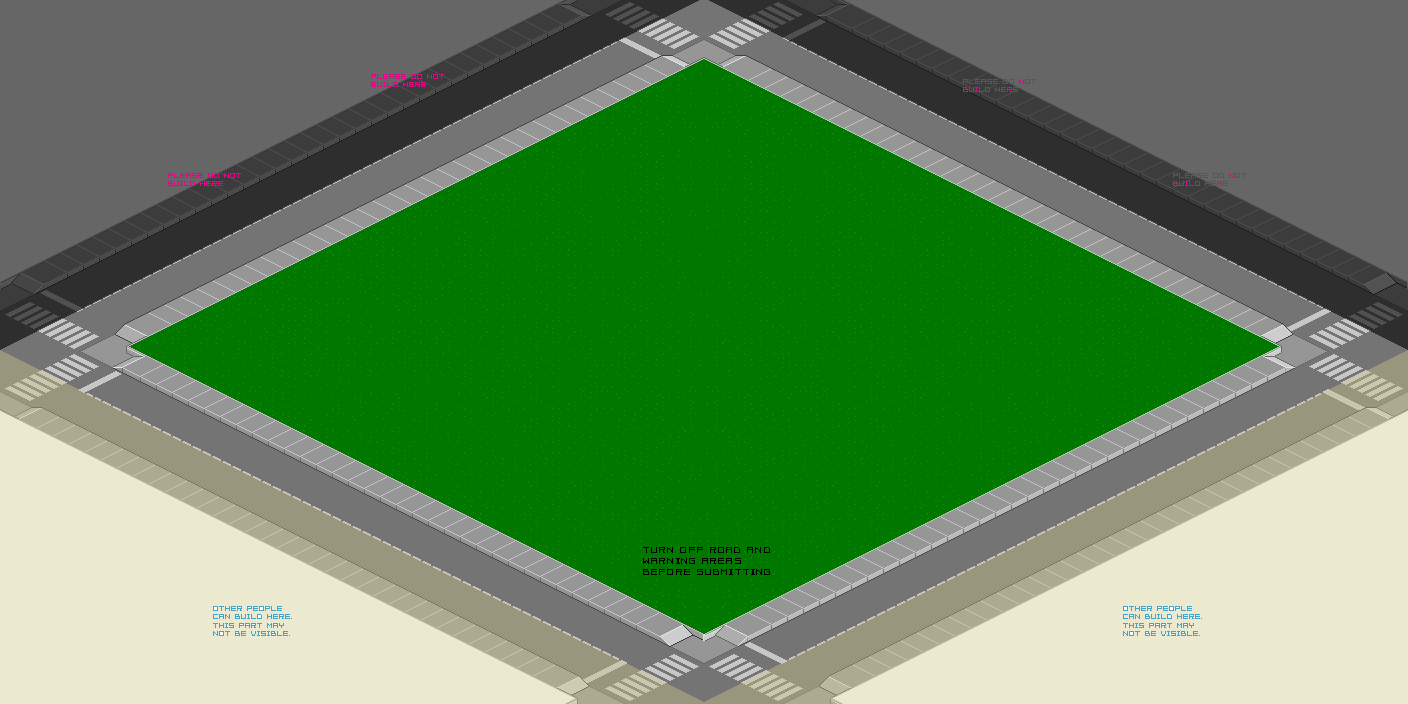
<style>
.page{position:relative;width:1408px;height:704px;background:#007800}
.page>*{position:absolute;margin:0}
.t1{font:7px "Pixelation";color:#ec008c}
.t2{font:9px "Pixelation";color:#000000}
.t3{font:7px "Pixelation";color:#3fa7ce}
</style>
<div class="page">
<p class="t1" style="left:371px;top:74px;width:73px;height:13px">PLEASE DO NOT<br>BUILD HERE</p>
<p class="t1" style="left:963px;top:79px;width:73px;height:13px">PLEASE DO NOT<br>BUILD HERE</p>
<p class="t1" style="left:168px;top:173px;width:73px;height:13px">PLEASE DO NOT<br>BUILD HERE</p>
<p class="t1" style="left:1173px;top:173px;width:73px;height:13px">PLEASE DO NOT<br>BUILD HERE</p>
<p class="t2" style="left:643px;top:547px;width:127px;height:28px">TURN OFF ROAD AND <br>WARNING AREAS<br>BEFORE SUBMITTING</p>
<p class="t3" style="left:213px;top:606px;width:79px;height:30px">OTHER PEOPLE CAN BUILD HERE. THIS PART MAY NOT BE VISIBLE.</p>
<p class="t3" style="left:1123px;top:606px;width:79px;height:30px">OTHER PEOPLE CAN BUILD HERE. THIS PART MAY NOT BE VISIBLE.</p>
</div>
